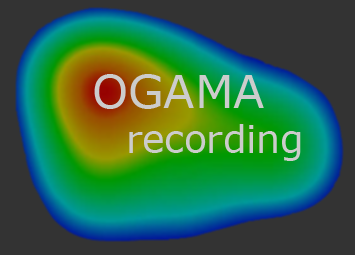
<style>
.page{position:relative;width:355px;height:255px;background:#333333}
.page>*{position:absolute;margin:0}
.t1{font:45.8px "Verdana";color:#cccccc}
.t2{font:37.5px "Verdana";color:#cccccc}
</style>
<div class="page">
<p class="t1" style="left:94px;top:74px;width:170px;height:35px">OGAMA</p>
<p class="t2" style="left:129px;top:124px;width:172px;height:37px">recording</p>
</div>
